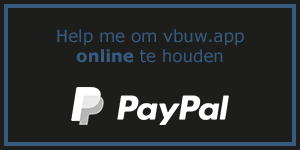
<style>
.page{position:relative;width:300px;height:150px;background:#1d1d1b}
.page>*{position:absolute;margin:0}
.t1{font:16.7px "Verdana";color:#375a7f}
.t2{font:16.7px "Verdana-Bold";color:#375a7f}
</style>
<div class="page">
<p class="t1" style="left:57px;top:29px;width:187px;height:34px;text-align:center">Help me om vbuw.app<br><span class="t2">online </span>te houden</p>
</div>
